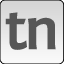
<style>
.page{position:relative;width:64px;height:64px}
.page>*{position:absolute;margin:0}
.t1{font:60px "FontinSans-Bold";letter-spacing:-0.05em;color:#565656}
</style>
<div class="page">
<p class="t1" style="left:5px;top:12px;width:51px;height:38px">tn</p>
</div>
